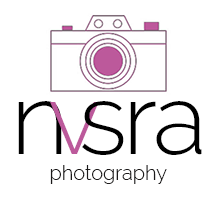
<style>
.page{position:relative;width:216px;height:198px;background:#ffffff}
.page>*{position:absolute;margin:0}
.t1{font:100px "Raleway-Light";letter-spacing:-0.04em;color:#000000}
.t2{font:100px "Raleway-Light";letter-spacing:-0.2em;color:#000000}
.t3{font:100px "Raleway-Light";letter-spacing:-0.2em;color:#bc599b}
.t4{font:20px "Raleway-Light";color:#1b1919}
</style>
<div class="page">
<p class="t1" style="left:18px;top:101px;width:184px;height:54px"><span class="t2">n</span><span class="t3">v</span>sra</p>
<p class="t4" style="left:50px;top:165px;width:117px;height:19px">photography</p>
</div>
